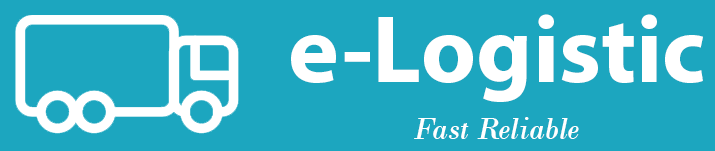
<style>
.page{position:relative;width:715px;height:151px;background:#1ca6bf}
.page>*{position:absolute;margin:0}
.t1{font:96px "MyriadPro-Bold";color:#ffffff}
.t2{font:32px "BodoniMT-Italic";color:#ffffff}
</style>
<div class="page">
<p class="t1" style="left:291px;top:14px;width:412px;height:88px">e-Logistic</p>
<p class="t2" style="left:414px;top:117px;width:165px;height:22px">Fast Reliable</p>
</div>
